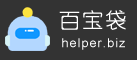
<style>
.page{position:relative;width:137px;height:60px;background:#333333}
.page>*{position:absolute;margin:0}
.t1{font:21px "YouYuan";letter-spacing:0.085em;color:#ffffff}
.t2{font:12.5px "ArialMT";letter-spacing:0.085em;color:#ffffff}
</style>
<div class="page">
<p class="t1" style="left:59px;top:10px;width:67px;height:20px">百宝袋</p>
<p class="t2" style="left:62px;top:38px;width:63px;height:12px">helper.biz</p>
</div>
